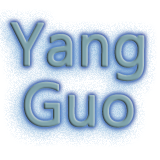
<style>
.page{position:relative;width:160px;height:160px;background:#ffffff}
.page>*{position:absolute;margin:0}
.t1{font:60px/60px "Leelawadee";color:#80a3ac;font-weight:bold}
</style>
<div class="page">
<p class="t1" style="left:10px;top:22px;width:135px;height:106px;text-align:center">Yang Guo</p>
</div>
